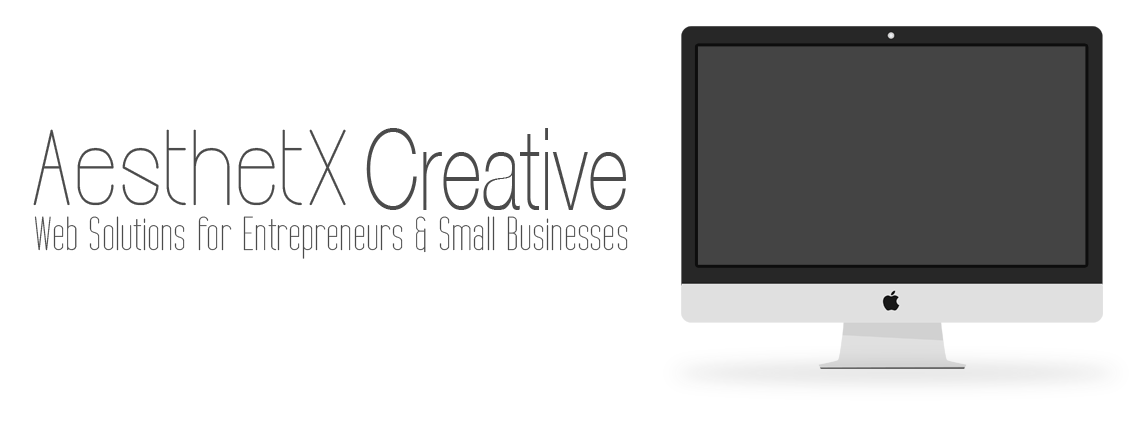
<style>
.page{position:relative;width:1129px;height:427px;background:#ffffff}
.page>*{position:absolute;margin:0}
.t1{font:107.3px "Infinity";color:#4b4b4b;scale:0.92 1}
.t2{font:113.7px "HelveticaNeueCE-Thin";color:#4b4b4b;scale:0.69 1}
.t3{font:48.2px "TallFilms";color:#4b4b4b;scale:1.18 1}
</style>
<div class="page">
<p class="t1" style="left:33px;top:129px;width:313px;height:77px">AesthetX</p>
<p class="t2" style="left:366px;top:128px;width:260px;height:82px">Creative</p>
<p class="t3" style="left:34px;top:216px;width:594px;height:43px">Web Solutions for Entrepreneurs &amp; Small Businesses</p>
</div>
